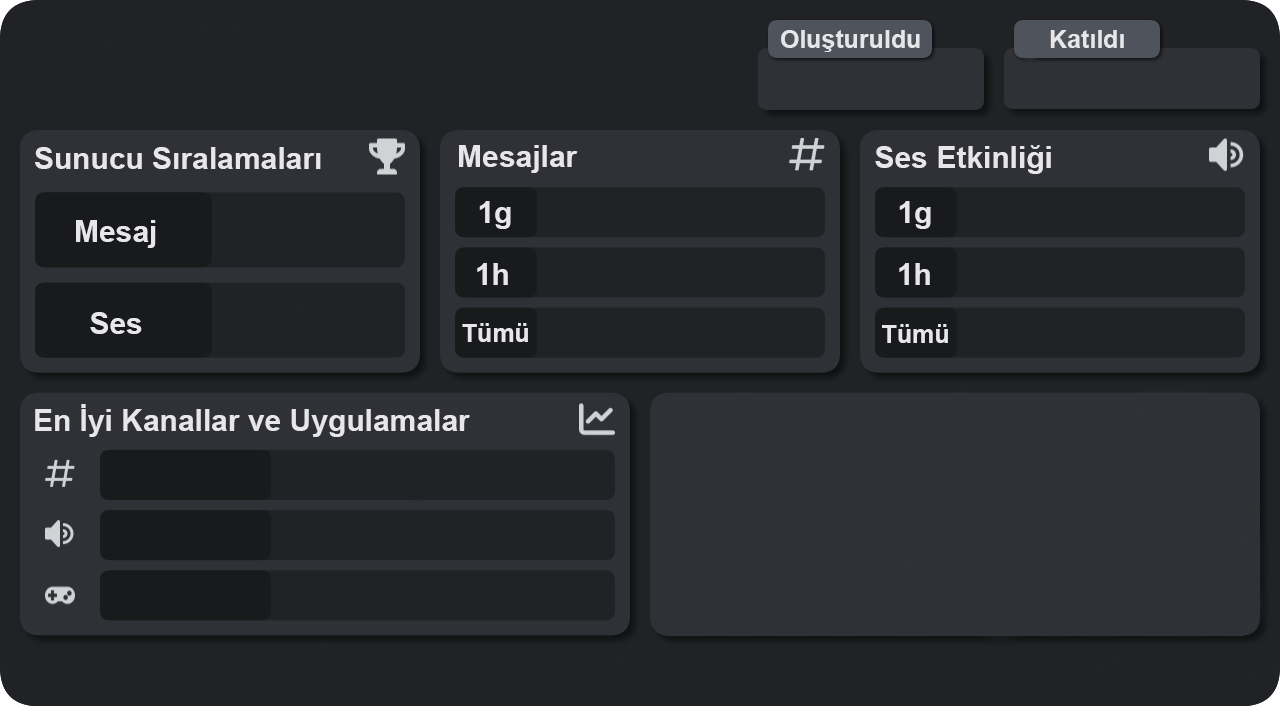
<style>
.page{position:relative;width:1280px;height:706px;background:#202225}
.page>*{position:absolute;margin:0}
.t1{font:25px "Arial-BoldMT";color:#e7e7e9}
.t2{font:30px "Arial-BoldMT";color:#e7e7e9}
</style>
<div class="page">
<p class="t1" style="left:781px;top:30px;width:139px;height:22px">Oluşturuldu</p>
<p class="t1" style="left:1050px;top:30px;width:74px;height:18px">Katıldı</p>
<p class="t2" style="left:35px;top:147px;width:286px;height:22px">Sunucu Sıralamaları</p>
<p class="t2" style="left:459px;top:145px;width:119px;height:28px">Mesajlar</p>
<p class="t2" style="left:875px;top:145px;width:176px;height:29px">Ses Etkinliği</p>
<p class="t2" style="left:479px;top:201px;width:32px;height:28px">1g</p>
<p class="t2" style="left:899px;top:201px;width:32px;height:28px">1g</p>
<p class="t2" style="left:76px;top:220px;width:80px;height:28px">Mesaj</p>
<p class="t2" style="left:477px;top:263px;width:31px;height:22px">1h</p>
<p class="t2" style="left:899px;top:263px;width:31px;height:22px">1h</p>
<p class="t2" style="left:90px;top:312px;width:52px;height:22px">Ses</p>
<p class="t1" style="left:462px;top:323px;width:66px;height:19px">Tümü</p>
<p class="t1" style="left:882px;top:324px;width:66px;height:19px">Tümü</p>
<p class="t2" style="left:35px;top:404px;width:435px;height:33px">En İyi Kanallar ve Uygulamalar</p>
</div>
